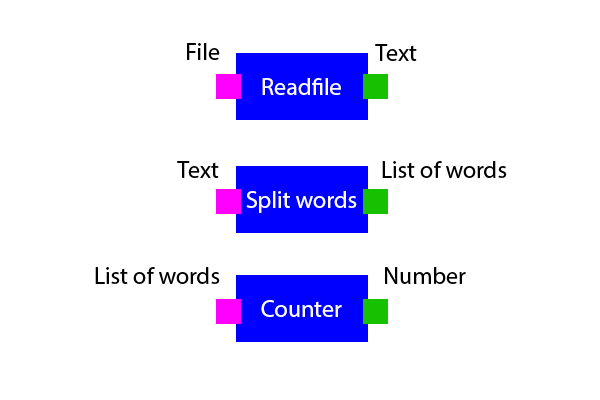
<style>
.page{position:relative;width:600px;height:400px;background:#ffffff}
.page>*{position:absolute;margin:0}
.t1{font:24px "MyriadPro-Regular";color:#000000}
.t2{font:24px "MyriadPro-Regular";color:#ffffff}
</style>
<div class="page">
<p class="t1" style="left:187px;top:43px;width:33px;height:17px">File</p>
<p class="t1" style="left:375px;top:44px;width:42px;height:17px">Text</p>
<p class="t2" style="left:262px;top:78px;width:79px;height:17px">Readfile</p>
<p class="t1" style="left:177px;top:161px;width:42px;height:17px">Text</p>
<p class="t1" style="left:382px;top:161px;width:125px;height:17px">List of words</p>
<p class="t2" style="left:246px;top:191px;width:111px;height:22px">Split words</p>
<p class="t1" style="left:95px;top:267px;width:125px;height:17px">List of words</p>
<p class="t1" style="left:385px;top:267px;width:81px;height:17px">Number</p>
<p class="t2" style="left:261px;top:300px;width:81px;height:17px">Counter</p>
</div>
